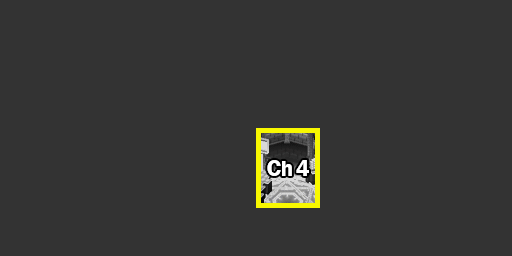
<style>
.page{position:relative;width:512px;height:256px;background:#333333}
.page>*{position:absolute;margin:0}
.t1{font:23.3px "FranklinGothic-Demi";color:#ffffff}
</style>
<div class="page">
<p class="t1" style="left:267px;top:160px;width:42px;height:16px">Ch 4</p>
</div>
